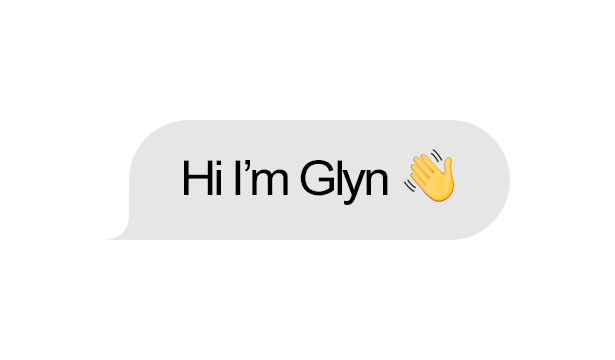
<style>
.page{position:relative;width:615px;height:360px;background:#ffffff}
.page>*{position:absolute;margin:0}
.t1{font:48.3px "ArialMT";letter-spacing:-0.072em;color:#000000;scale:1.05 1}
</style>
<div class="page">
<p class="t1" style="left:184px;top:160px;width:204px;height:45px">Hi I’m Glyn</p>
</div>
